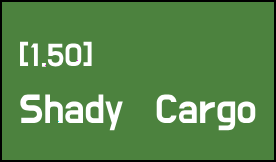
<style>
.page{position:relative;width:276px;height:162px;background:#4c823e}
.page>*{position:absolute;margin:0}
.t1{font:33px "DoHyeon-Regular";color:#ffffff}
.t2{font:42px "DoHyeon-Regular";color:#ffffff}
</style>
<div class="page">
<p class="t1" style="left:20px;top:41px;width:72px;height:26px">[1.50]</p>
<p class="t2" style="left:20px;top:94px;width:236px;height:37px">Shady Cargo</p>
</div>
